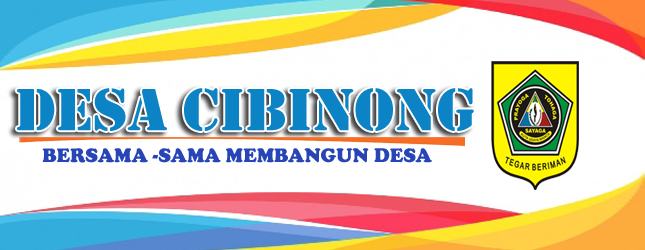
<style>
.page{position:relative;width:645px;height:250px;background:#ffffff}
.page>*{position:absolute;margin:0}
.t1{font:61.7px "Stencil";color:#0c83c5}
.t2{font:20.2px "CooperBlack";color:#2745b6}
</style>
<div class="page">
<p class="t1" style="left:17px;top:88px;width:457px;height:43px">DESA CIBINONG</p>
<p class="t2" style="left:42px;top:148px;width:390px;height:15px">BERSAMA -SAMA MEMBANGUN DESA</p>
</div>
